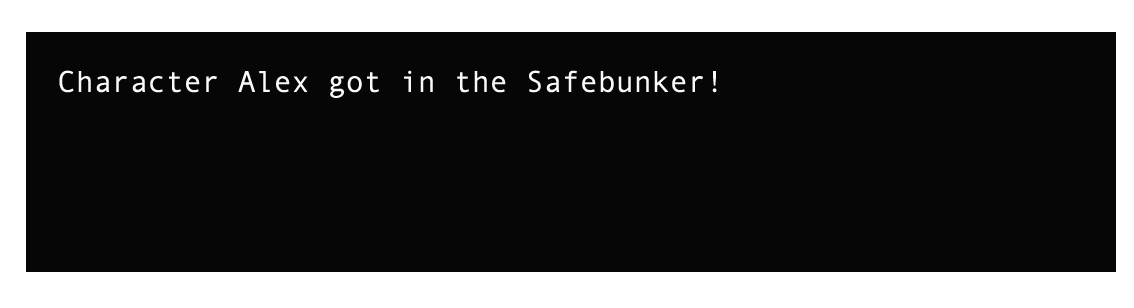
<style>
.page{position:relative;width:1134px;height:308px;background:#070606}
.page>*{position:absolute;margin:0}
.t1{font:30px "AndaleMono";color:#f8f9f9}
</style>
<div class="page">
<p class="t1" style="left:59px;top:70px;width:658px;height:28px">Character Alex got in the Safebunker!</p>
</div>
